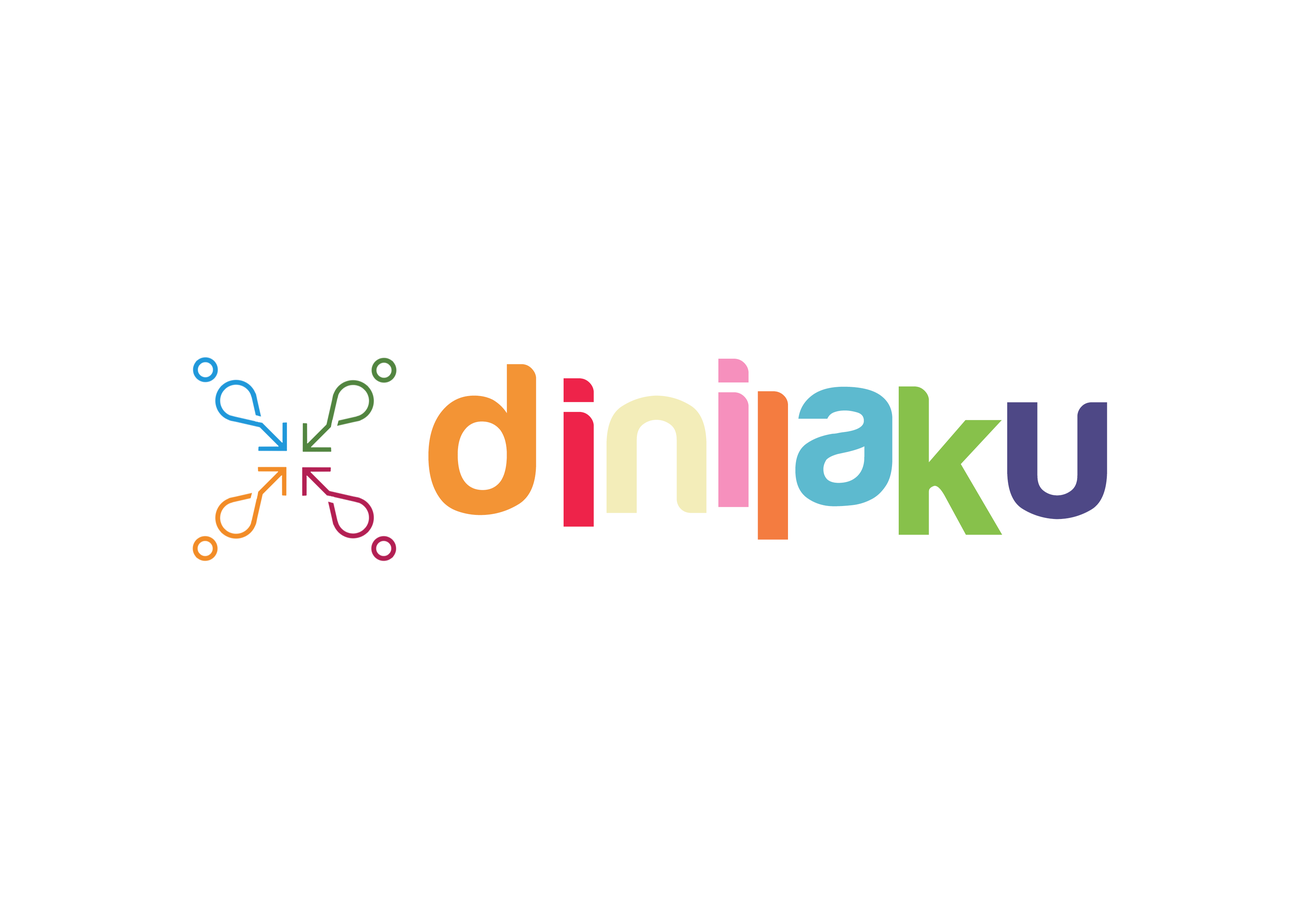
<style>
.page{position:relative;width:1299px;height:918px;background:#ffffff}
.page>*{position:absolute;margin:0}
.t1{font:220.7px "Harabara";color:#f39435}
.t2{font:220.7px "Harabara";color:#f690bd}
.t3{font:220.7px "Harabara";color:#ee234a}
.t4{font:220.7px "Harabara";color:#5dbacf}
.t5{font:220.7px "Harabara";color:#87c14b}
.t6{font:220.7px "Harabara";color:#f3edb9}
.t7{font:220.7px "Harabara";color:#f47c40}
.t8{font:220.7px "Harabara";color:#4e4886}
</style>
<div class="page">
<p class="t1" style="left:428px;top:364px;width:108px;height:151px">d</p>
<p class="t2" style="left:718px;top:359px;width:31px;height:148px">i</p>
<p class="t3" style="left:563px;top:378px;width:31px;height:149px">i</p>
<p class="t4" style="left:795px;top:387px;width:97px;height:119px">a</p>
<p class="t5" style="left:899px;top:387px;width:103px;height:148px">k</p>
<p class="t6" style="left:606px;top:395px;width:100px;height:118px">n</p>
<p class="t7" style="left:757px;top:391px;width:31px;height:149px">l</p>
<p class="t8" style="left:1007px;top:402px;width:100px;height:117px">u</p>
</div>
